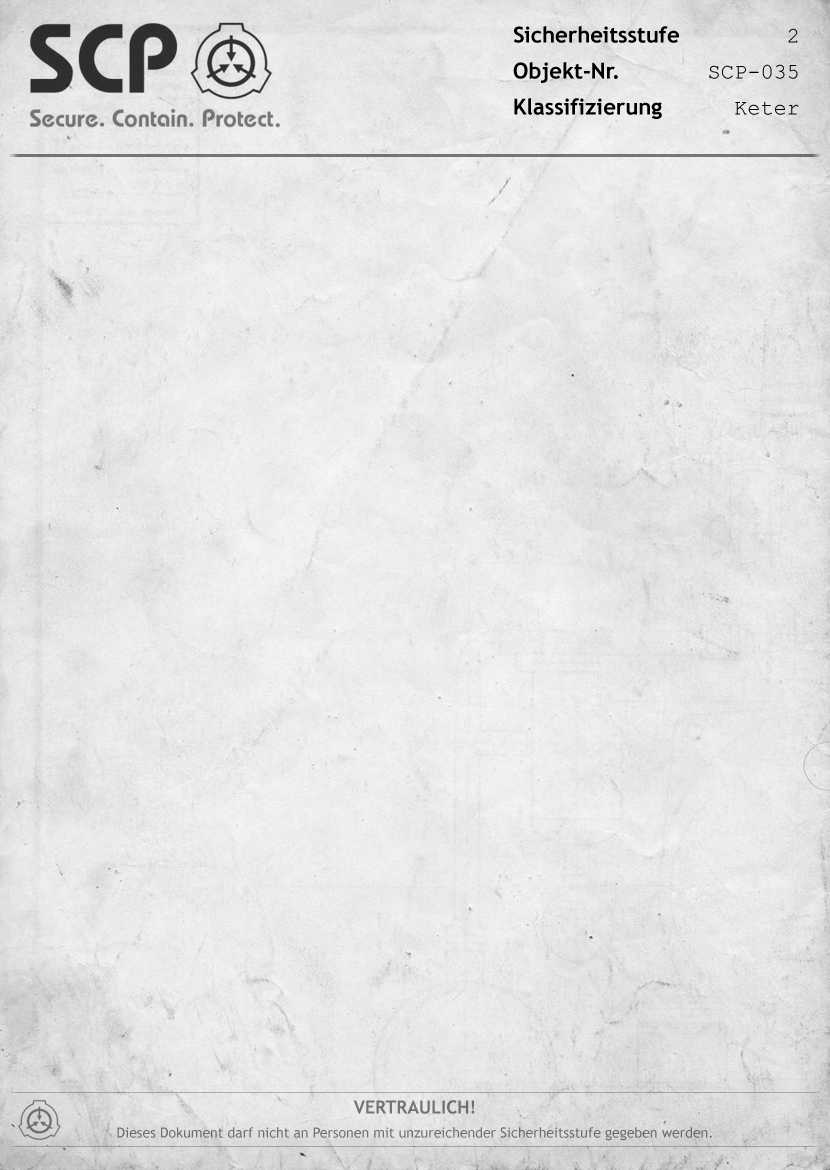
<style>
.page{position:relative;width:830px;height:1170px}
.page>*{position:absolute;margin:0}
.t1{font:22px/18px "TrebuchetMS-Bold";color:#000000}
.t2{font:22px/18px "CourierNewPSMT";color:#000000}
.t3{font:14px/24px "TrebuchetMS";color:#6f6f6f}
.t4{font:18px/24px "TrebuchetMS-Bold";color:#6f6f6f}
</style>
<div class="page">
<p class="t1" style="left:513px;top:26px;width:286px;height:93px;text-align:right">Sicherheitsstufe <span class="t2">2<br><br></span>Objekt-Nr.   <span class="t2">SCP-035<br><br></span>Klassifizierung <span class="t2">Keter</span></p>
<p class="t3" style="left:117px;top:1100px;width:595px;height:41px;text-align:center"><span class="t4">VERTRAULICH!<br></span>Dieses Dokument darf nicht an Personen mit unzureichender Sicherheitsstufe gegeben werden.</p>
</div>
